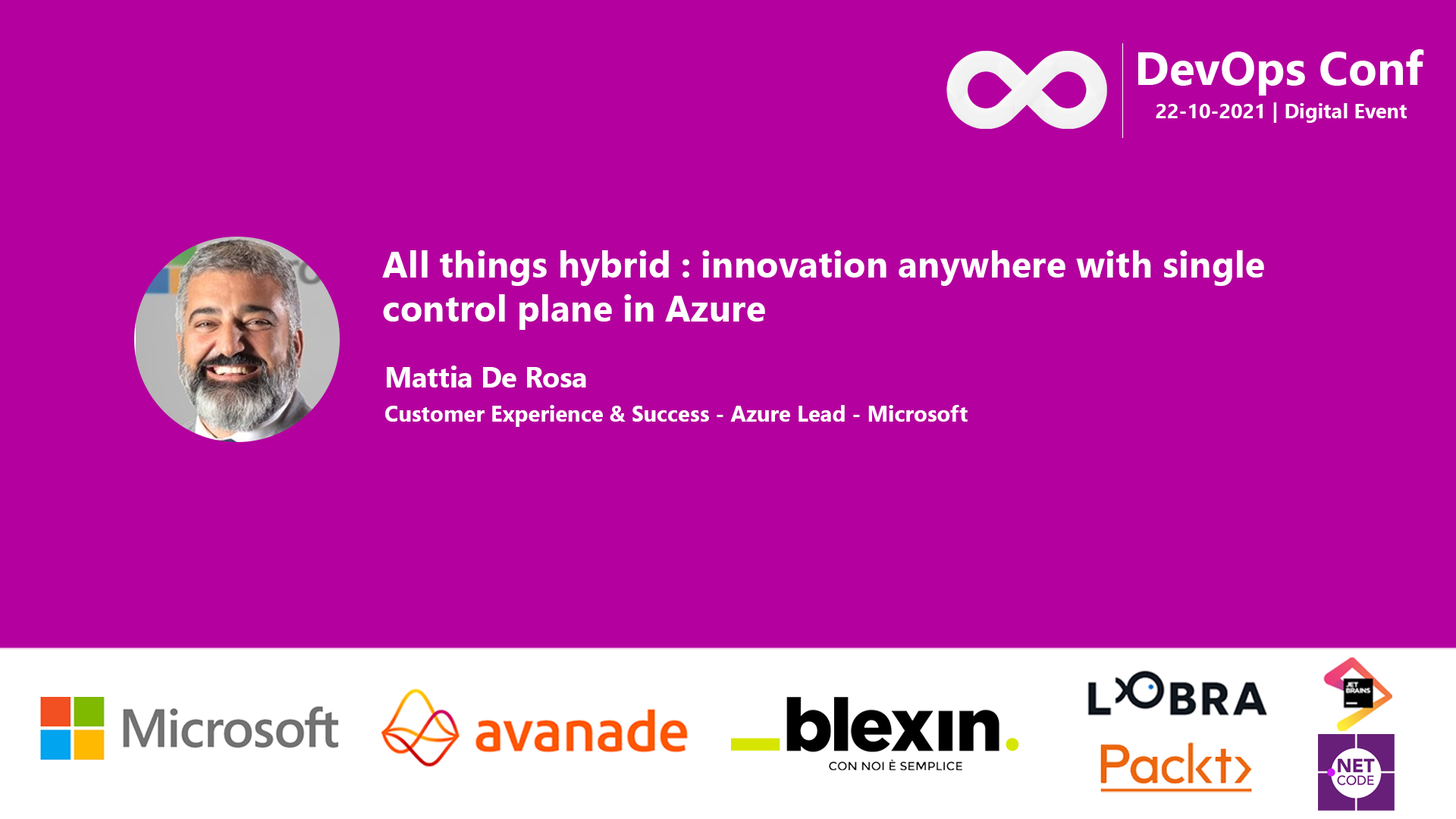
<style>
.page{position:relative;width:1456px;height:819px;background:#b4009e}
.page>*{position:absolute;margin:0}
.t1{font:47.1px "SegoeUI-Bold";color:#ffffff}
.t2{font:20.5px "SegoeUI-Bold";color:#ffffff}
.t3{font:36.4px "SegoeUI-Bold";color:#ffffff}
.t4{font:28.4px "SegoeUI-Bold";color:#ffffff}
.t5{font:22.1px "SegoeUI-Bold";color:#ffffff}
</style>
<div class="page">
<p class="t1" style="left:1138px;top:49px;width:286px;height:47px">DevOps Conf</p>
<p class="t2" style="left:1156px;top:102px;width:251px;height:21px">22-10-2021 | Digital Event</p>
<p class="t3" style="left:382px;top:250px;width:882px;height:80px">All things hybrid : innovation anywhere with single control plane in Azure</p>
<p class="t4" style="left:387px;top:366px;width:199px;height:22px">Mattia De Rosa</p>
<p class="t5" style="left:385px;top:405px;width:583px;height:22px">Customer Experience &amp; Success - Azure Lead - Microsoft</p>
</div>
